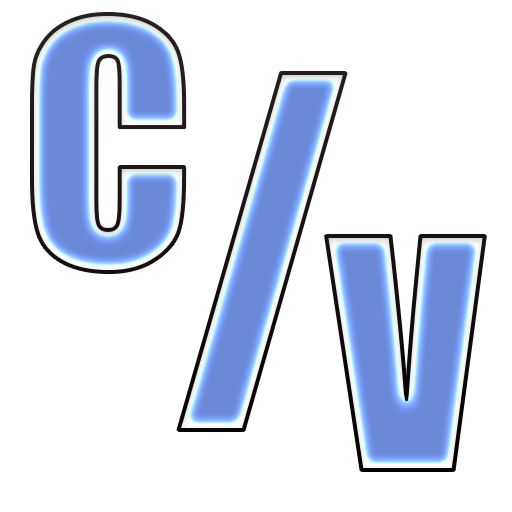
<style>
.page{position:relative;width:512px;height:512px;background:#ffffff}
.page>*{position:absolute;margin:0}
.t1{font:313px "Impact";letter-spacing:0.04em}
.t2{font:434.8px "Impact";letter-spacing:0.04em}
.t3{font:295.8px "Impact";letter-spacing:0.04em}
</style>
<div class="page">
<p class="t1" style="left:32px;top:14px;width:153px;height:258px">C</p>
<p class="t2" style="left:178px;top:73px;width:168px;height:357px">/</p>
<p class="t3" style="left:326px;top:236px;width:159px;height:234px">V</p>
</div>
